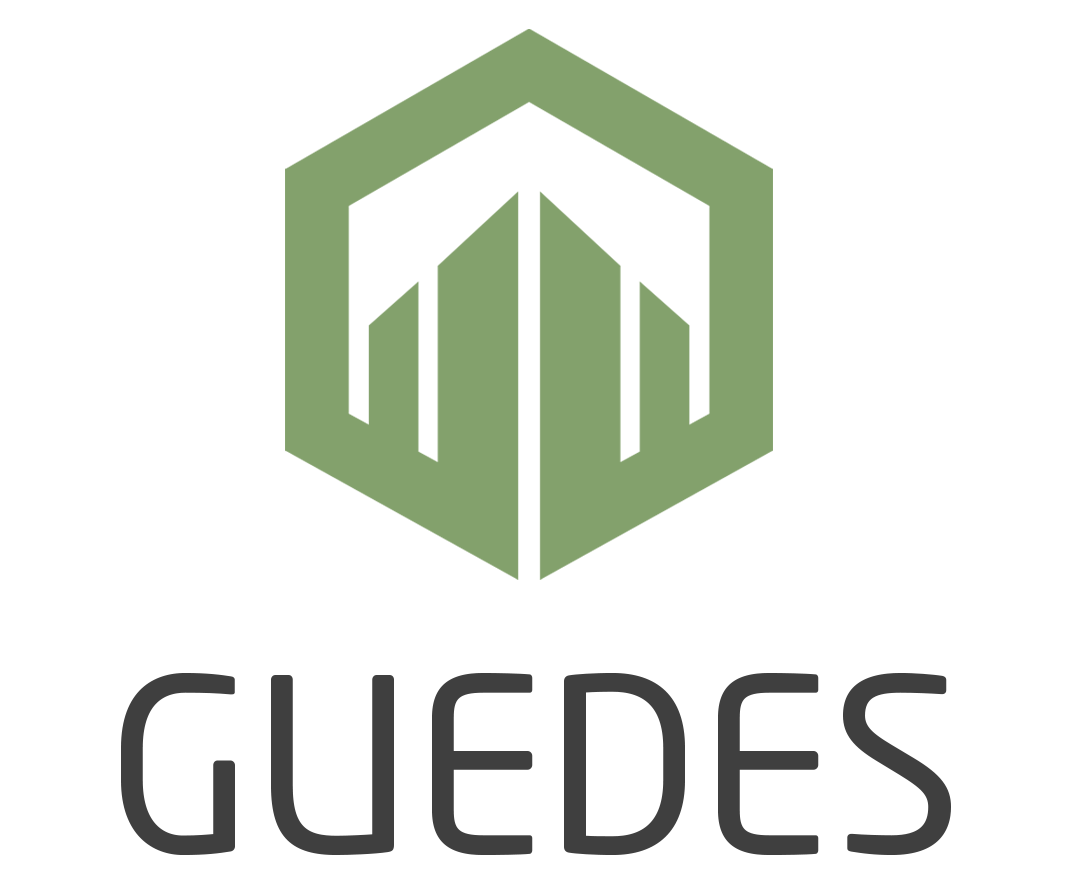
<style>
.page{position:relative;width:1072px;height:876px;background:#ffffff}
.page>*{position:absolute;margin:0}
.t1{font:240px "NeoTech";color:#3f3f3f}
</style>
<div class="page">
<p class="t1" style="left:121px;top:673px;width:830px;height:183px">GUEDES</p>
</div>
